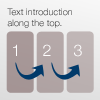
<style>
.page{position:relative;width:100px;height:100px}
.page>*{position:absolute;margin:0}
.t1{font:9px "HelveticaNeue-Light";letter-spacing:0.01em}
.t2{font:16px "HelveticaNeue-Light";letter-spacing:0.01em;color:#ffffff}
</style>
<div class="page">
<p class="t1" style="left:7px;top:8px;width:65px;height:20px">Text introduction<br>along the top.</p>
<p class="t2" style="left:13px;top:44px;width:4px;height:12px">1</p>
<p class="t2" style="left:43px;top:44px;width:8px;height:12px">2</p>
<p class="t2" style="left:74px;top:44px;width:8px;height:13px">3</p>
</div>
